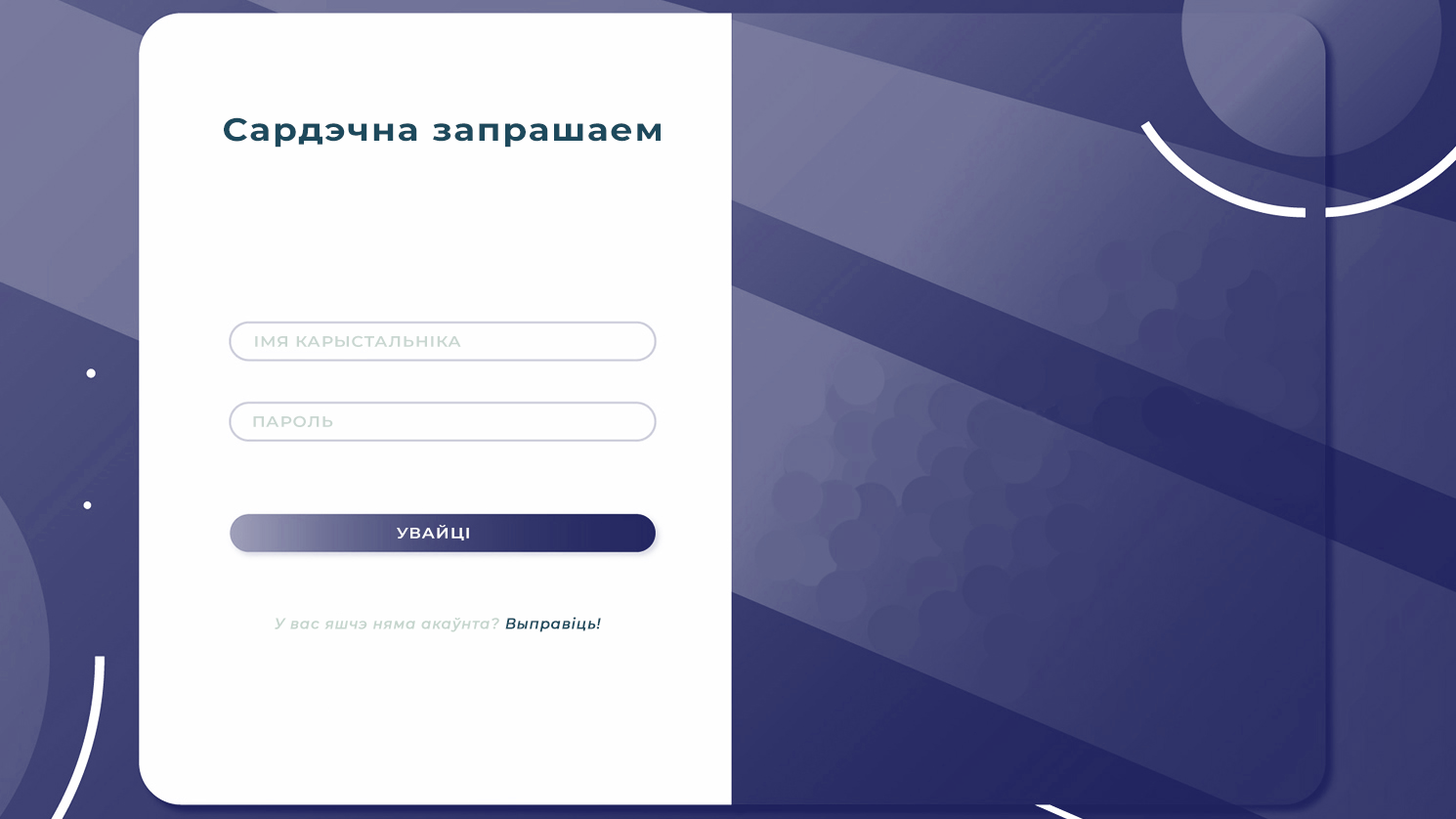
<style>
.page{position:relative;width:1456px;height:819px;background:#fefefe}
.page>*{position:absolute;margin:0}
.t1{font:31.7px "Montserrat-Bold";letter-spacing:0.05em;color:#1d495c;scale:1.11 1}
.t2{font:15px "Montserrat-SemiBold";letter-spacing:0.05em;color:#c8d6d0;scale:1.11 1}
.t3{font:15px "Montserrat-SemiBold";letter-spacing:0.05em;color:#ffffff;scale:1.11 1}
.t4{font:15px "Montserrat-MediumItalic";letter-spacing:0.05em;color:#c5d5cd;font-weight:bold;scale:0.94 1}
.t5{font:15px "Montserrat-MediumItalic";letter-spacing:0.05em;color:#1d495c;font-weight:bold;scale:0.94 1}
</style>
<div class="page">
<p class="t1" style="left:224px;top:117px;width:437px;height:31px">Сардэчна запрашаем</p>
<p class="t2" style="left:255px;top:335px;width:206px;height:12px">ІМЯ КАРЫСТАЛЬНІКА</p>
<p class="t2" style="left:253px;top:415px;width:80px;height:12px">ПАРОЛЬ</p>
<p class="t3" style="left:397px;top:525px;width:72px;height:15px">УВАЙЦІ</p>
<p class="t4" style="left:275px;top:617px;width:326px;height:15px">У вас яшчэ няма акаўнта? <span class="t5">Выправіць!</span></p>
</div>
